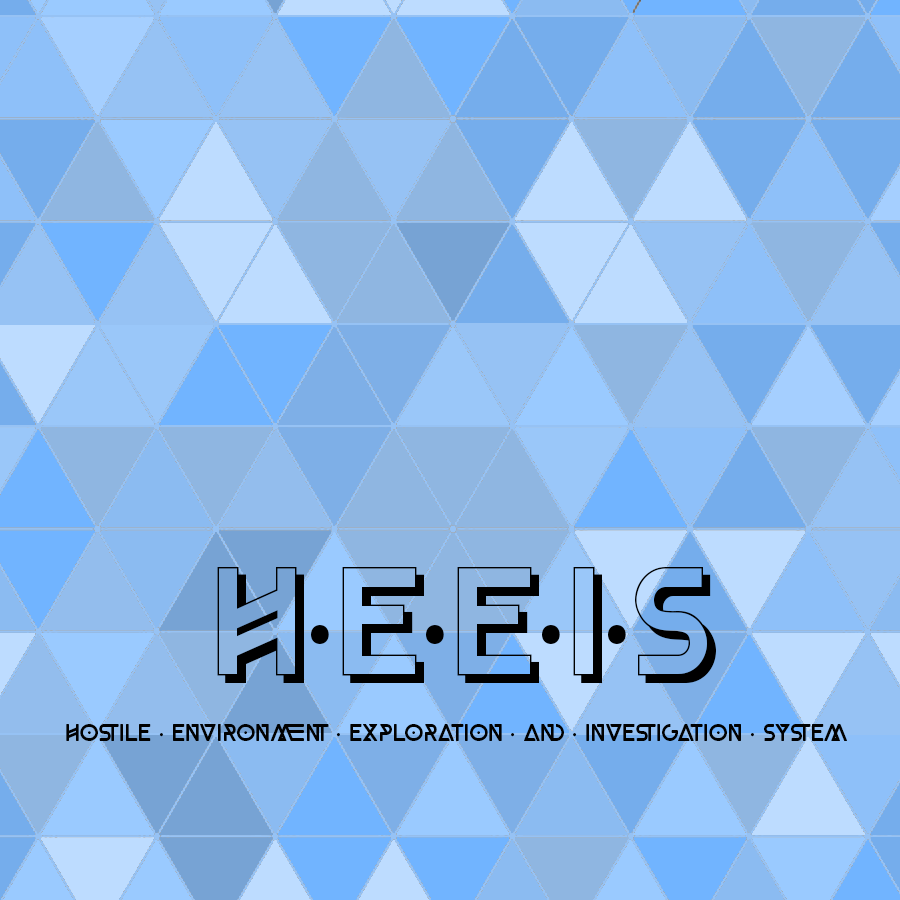
<style>
.page{position:relative;width:900px;height:900px}
.page>*{position:absolute;margin:0}
.t1{font:150px "RobloxBlackShadow";color:#000000}
.t2{font:150px "MyriadPro-Regular";color:#000000}
.t3{font:24px "RobloxBlackRound";color:#010101}
.t4{font:24px "MyriadPro-Regular";color:#010101}
</style>
<div class="page">
<p class="t1" style="left:217px;top:567px;width:499px;height:116px">H<span class="t2">·</span>E<span class="t2">·</span>E<span class="t2">·</span>I<span class="t2">·</span>S</p>
<p class="t3" style="left:66px;top:724px;width:781px;height:17px">Hostile <span class="t4">·</span> Environment <span class="t4">·</span> Exploration <span class="t4">·</span> and <span class="t4">·</span> Investigation <span class="t4">·</span> System</p>
</div>
